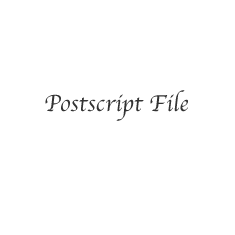
<style>
.page{position:relative;width:235px;height:235px;background:#ffffff}
.page>*{position:absolute;margin:0}
.t1{font:24px "Apple-Chancery";color:#333333}
</style>
<div class="page">
<p class="t1" style="left:45px;top:90px;width:143px;height:31px">Postscript File</p>
</div>
